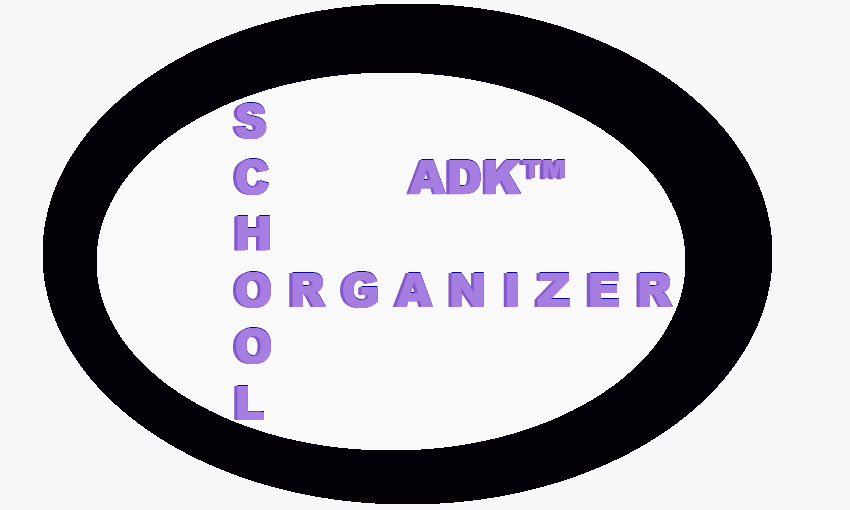
<style>
.page{position:relative;width:850px;height:510px;background:#faf9fa}
.page>*{position:absolute;margin:0}
.t1{font:47px "Arial-Black";color:#a67ee1}
</style>
<div class="page">
<p class="t1" style="left:235px;top:102px;width:438px;height:317px">S<br>C     ADK™<br>H<br>O R G A N I Z E R<br>O<br>L</p>
<p class="t1" style="left:232px;top:103px;width:438px;height:317px">S<br>C     ADK™<br>H<br>O R G A N I Z E R<br>O<br>L</p>
<p class="t1" style="left:233px;top:103px;width:438px;height:317px">S<br>C     ADK™<br>H<br>O R G A N I Z E R<br>O<br>L</p>
<p class="t1" style="left:235px;top:103px;width:438px;height:317px">S<br>C     ADK™<br>H<br>O R G A N I Z E R<br>O<br>L</p>
<p class="t1" style="left:235px;top:103px;width:438px;height:317px">S<br>C     ADK™<br>H<br>O R G A N I Z E R<br>O<br>L</p>
<p class="t1" style="left:235px;top:103px;width:438px;height:317px">S<br>C     ADK™<br>H<br>O R G A N I Z E R<br>O<br>L</p>
</div>
